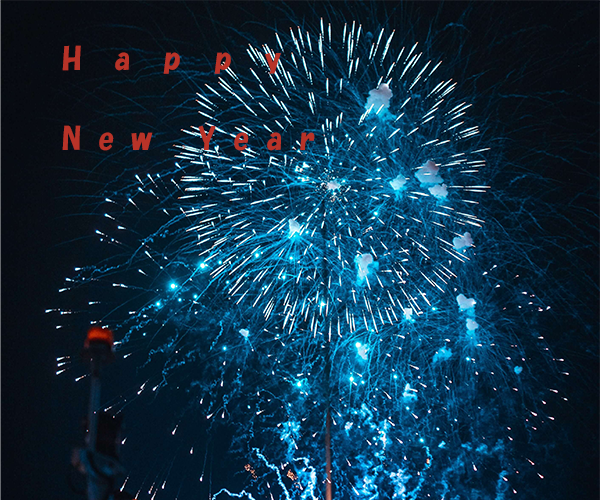
<style>
.page{position:relative;width:600px;height:500px}
.page>*{position:absolute;margin:0}
.t1{font:30px/80px "HGSSoeiKakupoptai";color:#b83328}
</style>
<div class="page">
<p class="t1" style="left:62px;top:45px;width:253px;height:106px;text-align:justify">Happy <br>New Year</p>
</div>
